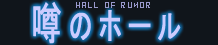
<style>
.page{position:relative;width:218px;height:45px;background:#10151b}
.page>*{position:absolute;margin:0}
.t1{font:36px "MS-Gothic";letter-spacing:0.2em;color:#ccccff;font-weight:bold;scale:0.67 1}
.t2{font:45px "MS-Gothic";letter-spacing:0.2em;color:#ccccff;font-weight:bold;scale:0.67 1}
.t3{font:9px "04b08";letter-spacing:0.2em;color:#9999cc;font-weight:bold;scale:0.67 1}
</style>
<div class="page">
<p class="t1" style="left:33px;top:2px;width:148px;height:42px"><span class="t2">噂</span>のホール</p>
<p class="t3" style="left:76px;top:2px;width:74px;height:6px">Hall of Rumor</p>
</div>
